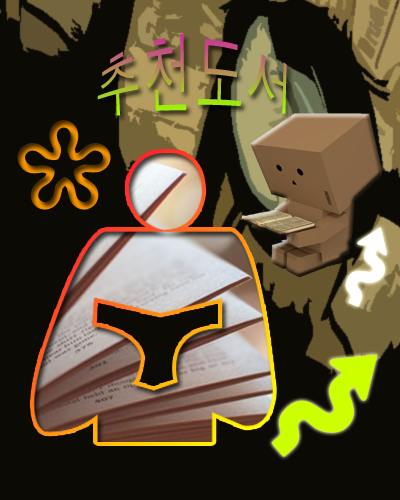
<style>
.page{position:relative;width:400px;height:500px;background:#0c0a05}
.page>*{position:absolute;margin:0}
.t1{font:50px "Dotum"}
</style>
<div class="page">
<p class="t1" style="left:97px;top:33px;width:190px;height:83px">추천도서</p>
</div>
